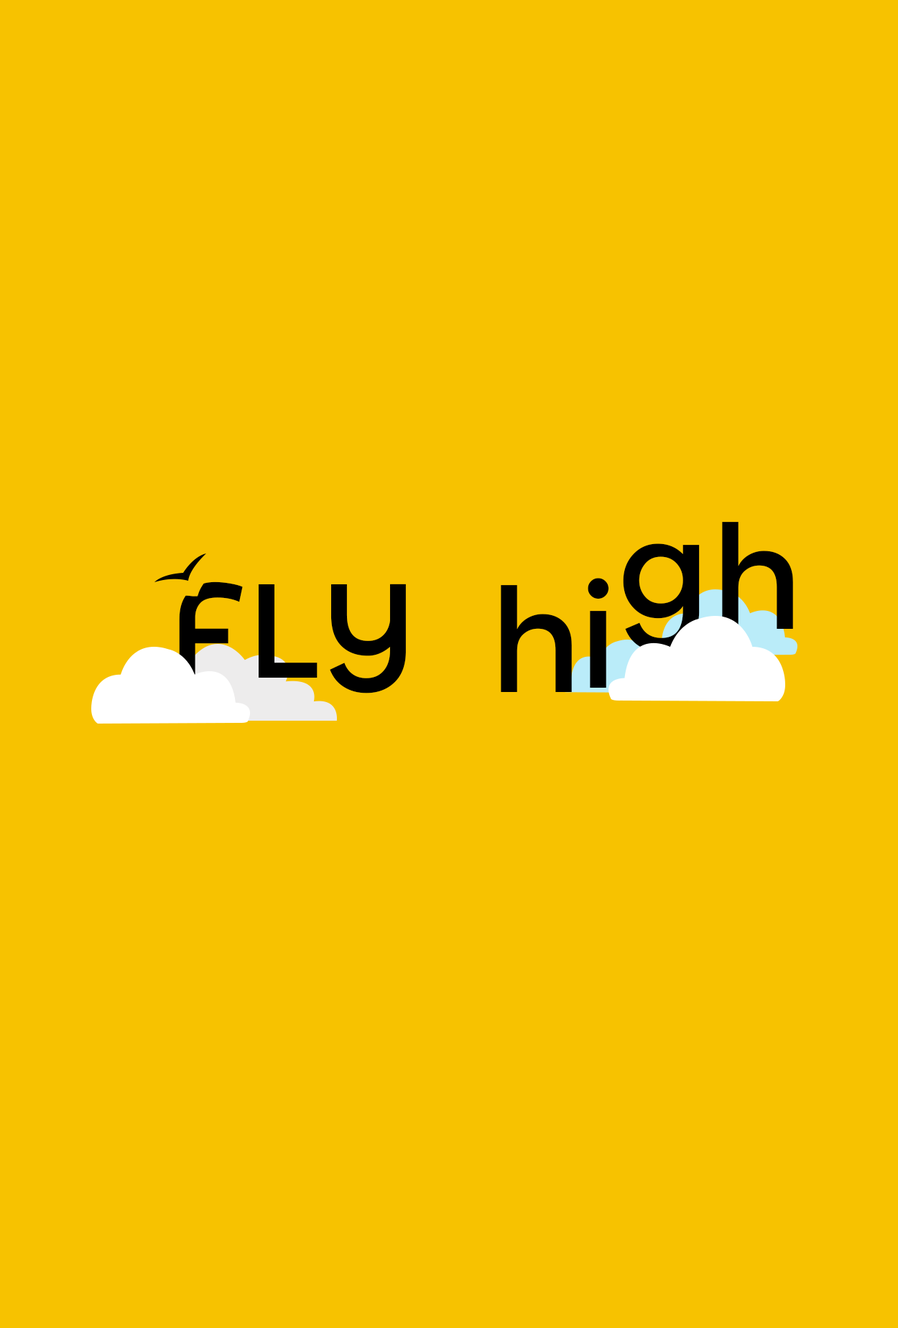
<style>
.page{position:relative;width:898px;height:1328px;background:#f7c200}
.page>*{position:absolute;margin:0}
.t1{font:144.4px "MontserratAlternates-Regular";color:#000000}
.t2{font:133.7px "MontserratAlternates-Regular";color:#000000;text-transform:uppercase}
</style>
<div class="page">
<p class="t1" style="left:722px;top:522px;width:71px;height:107px">h</p>
<p class="t1" style="left:623px;top:544px;width:76px;height:109px">g</p>
<p class="t2" style="left:179px;top:582px;width:227px;height:112px">fly</p>
<p class="t1" style="left:587px;top:578px;width:22px;height:110px">i</p>
<p class="t1" style="left:501px;top:585px;width:71px;height:107px">h</p>
</div>
